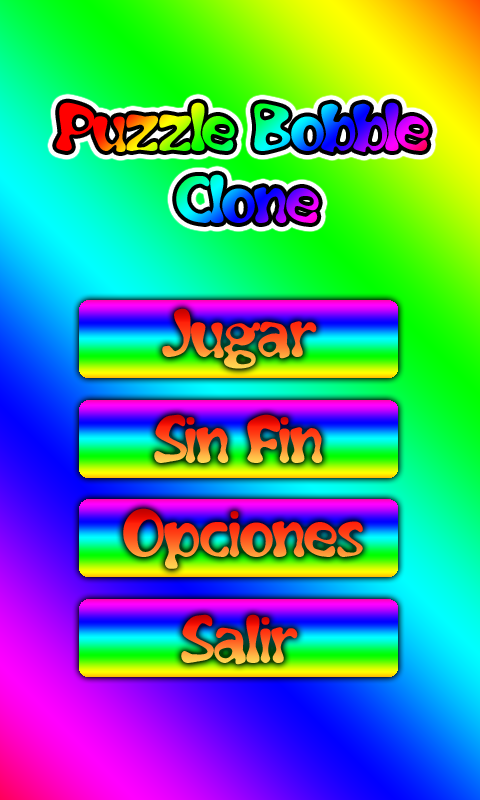
<style>
.page{position:relative;width:480px;height:800px}
.page>*{position:absolute;margin:0}
.t1{font:60px "Flubber"}
</style>
<div class="page">
<p class="t1" style="left:162px;top:308px;width:155px;height:61px">Jugar</p>
<p class="t1" style="left:154px;top:414px;width:169px;height:49px">Sin Fin</p>
<p class="t1" style="left:123px;top:508px;width:240px;height:61px">Opciones</p>
<p class="t1" style="left:181px;top:614px;width:117px;height:51px">Salir</p>
</div>
